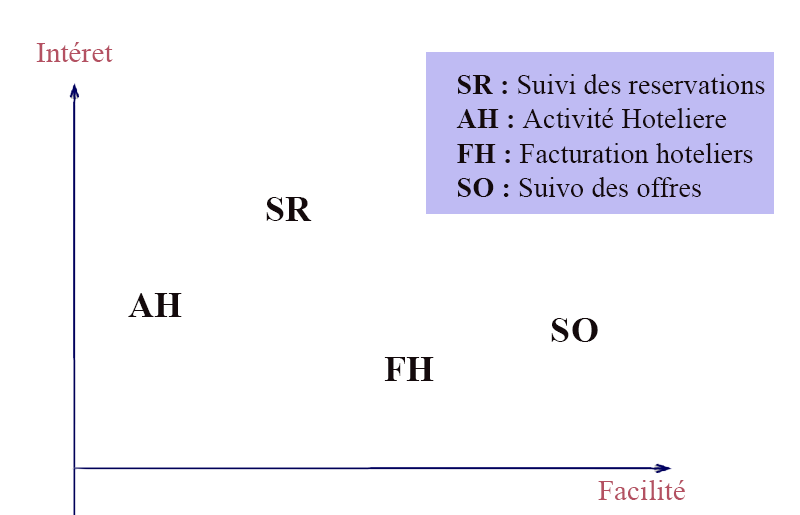
<style>
.page{position:relative;width:800px;height:515px;background:#ffffff}
.page>*{position:absolute;margin:0}
.t1{font:29.4px "TimesNewRomanPSMT";color:#b45162}
.t2{font:28.4px "TimesNewRomanPSMT";color:#140a0c}
.t3{font:28.4px "TimesNewRomanPS-BoldMT";color:#140a0c}
.t4{font:36.4px "TimesNewRomanPS-BoldMT";color:#140a0c}
</style>
<div class="page">
<p class="t1" style="left:36px;top:42px;width:77px;height:20px">Intéret</p>
<p class="t2" style="left:456px;top:74px;width:309px;height:123px"><span class="t3">SR : </span>Suivi des reservations<br><span class="t3">AH : </span>Activité Hoteliere<br><span class="t3">FH : </span>Facturation hoteliers<br><span class="t3">SO : </span>Suivo des offres</p>
<p class="t4" style="left:266px;top:197px;width:46px;height:24px">SR</p>
<p class="t4" style="left:128px;top:293px;width:54px;height:24px">AH</p>
<p class="t4" style="left:551px;top:318px;width:47px;height:24px">SO</p>
<p class="t4" style="left:384px;top:357px;width:50px;height:24px">FH</p>
<p class="t1" style="left:598px;top:480px;width:87px;height:20px">Facilité</p>
</div>
